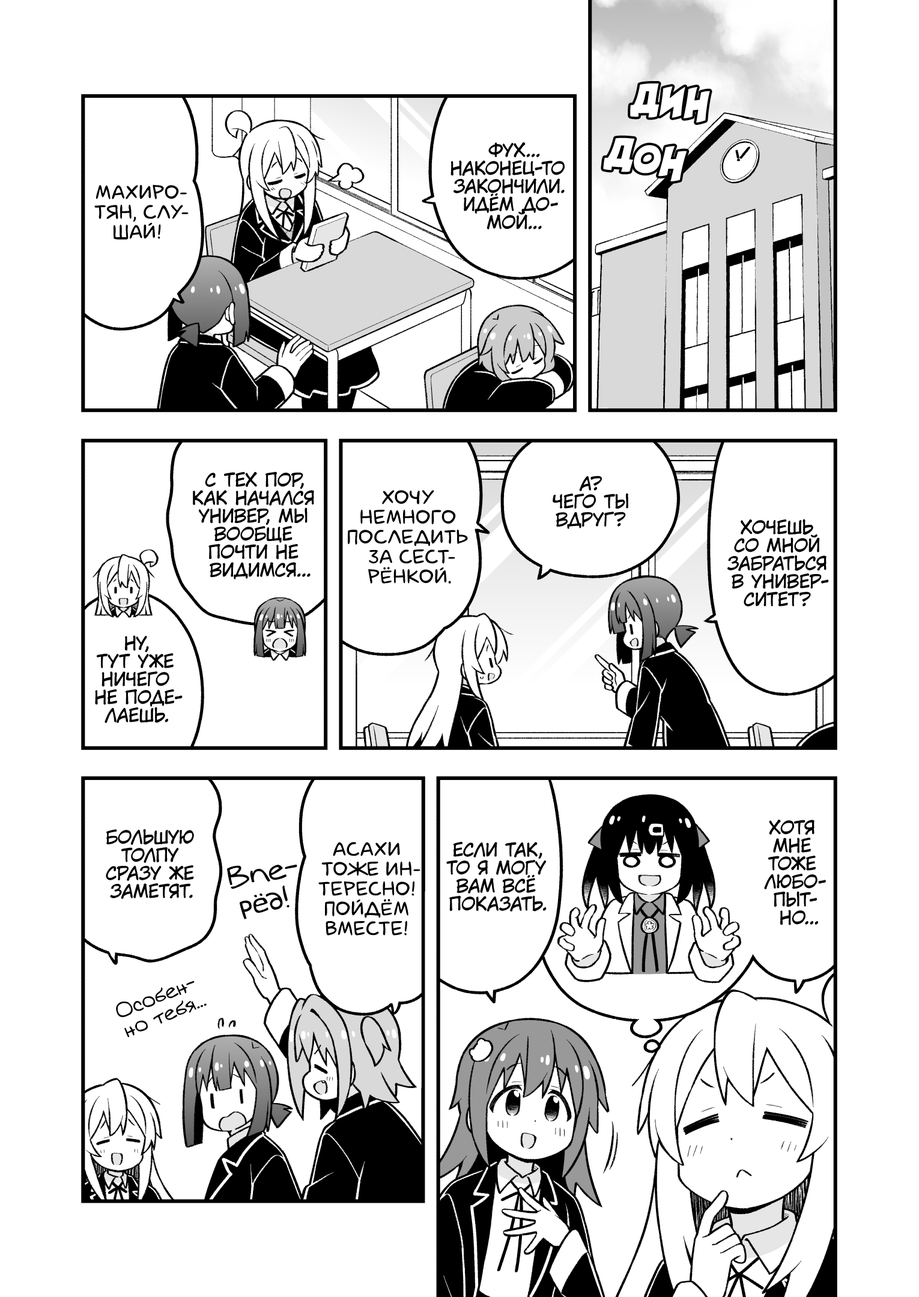
<style>
.page{position:relative;width:919px;height:1297px;background:#ffffff}
.page>*{position:absolute;margin:0}
.t1{font:39.6px "v_CCRatatatat";color:#ffffff}
.t2{font:18px "KuraiVoice2";color:#000000;text-transform:uppercase}
.t3{font:19.8px "laCartoonerie";color:#000000;text-transform:uppercase}
.t4{font:28.8px "v_Augie";color:#000000}
.t5{font:19.8px "v_Augie";color:#000000}
</style>
<div class="page">
<p class="t1" style="left:630px;top:83px;width:80px;height:40px;rotate:8deg">дин</p>
<p class="t1" style="left:603px;top:138px;width:84px;height:43px;rotate:13deg">дон</p>
<p class="t2" style="left:451px;top:142px;width:114px;height:87px;text-align:center">Фух...<br>Наконец-то<br>закончили.<br>Идём до-<br>мой...</p>
<p class="t3" style="left:94px;top:184px;width:95px;height:56px;text-align:center">Махиро-<br>тян, слу-<br>шай!</p>
<p class="t2" style="left:193px;top:472px;width:121px;height:108px;text-align:center">С тех пор,<br>как начался<br>универ, мы<br>вообще<br>почти не<br>видимся...</p>
<p class="t2" style="left:553px;top:476px;width:75px;height:53px;text-align:center">А?<br>Чего ты<br>вдруг?</p>
<p class="t3" style="left:348px;top:490px;width:120px;height:94px;text-align:center">хочу<br>немного<br>последить<br>за сест-<br>рёнкой.</p>
<p class="t2" style="left:727px;top:519px;width:102px;height:88px;text-align:center">Хочешь<br>со мной<br>забраться<br>в универ-<br>ситет?</p>
<p class="t2" style="left:95px;top:636px;width:88px;height:87px;text-align:center">Ну,<br>тут уже<br>ничего<br>не поде-<br>лаешь.</p>
<p class="t2" style="left:764px;top:820px;width:62px;height:106px;text-align:center">Хотя<br>мне<br>тоже<br>любо-<br>пыт-<br>но...</p>
<p class="t2" style="left:106px;top:829px;width:88px;height:70px;text-align:center">Большую<br>толпу<br>сразу же<br>заметят.</p>
<p class="t3" style="left:318px;top:842px;width:102px;height:94px;text-align:center">Асахи<br>тоже ин-<br>тересно!<br>Пойдём<br>вместе!</p>
<p class="t2" style="left:446px;top:842px;width:101px;height:70px;text-align:center">Если так,<br>то я могу<br>вам всё<br>показать.</p>
<p class="t4" style="left:227px;top:864px;width:70px;height:56px;text-align:center;rotate:-11deg">Впе-<br>рёд!</p>
<p class="t5" style="left:116px;top:981px;width:91px;height:57px;text-align:center;rotate:-22deg">Особен-<br>но тебя...</p>
</div>
